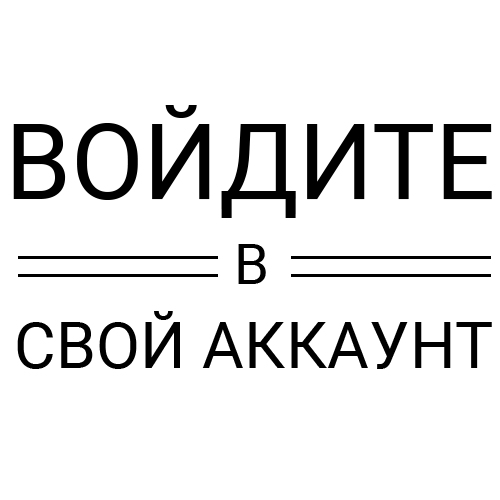
<style>
.page{position:relative;width:500px;height:500px;background:#ffffff}
.page>*{position:absolute;margin:0}
.t1{font:105.6px "Roboto-Regular";color:#000000}
.t2{font:55.6px "Roboto-Regular";color:#000000}
.t3{font:64.4px "Roboto-Regular";color:#000000}
</style>
<div class="page">
<p class="t1" style="left:13px;top:105px;width:479px;height:113px">ВОЙДИТЕ</p>
<p class="t2" style="left:238px;top:244px;width:28px;height:40px">В</p>
<p class="t3" style="left:17px;top:311px;width:475px;height:58px">СВОЙ АККАУНТ</p>
</div>
